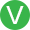
<style>
.page{position:relative;width:30px;height:30px;background:#39b54a}
.page>*{position:absolute;margin:0}
.t1{font:25px "ArialMT";color:#ffffff}
</style>
<div class="page">
<p class="t1" style="left:6px;top:6px;width:18px;height:18px">V</p>
</div>
